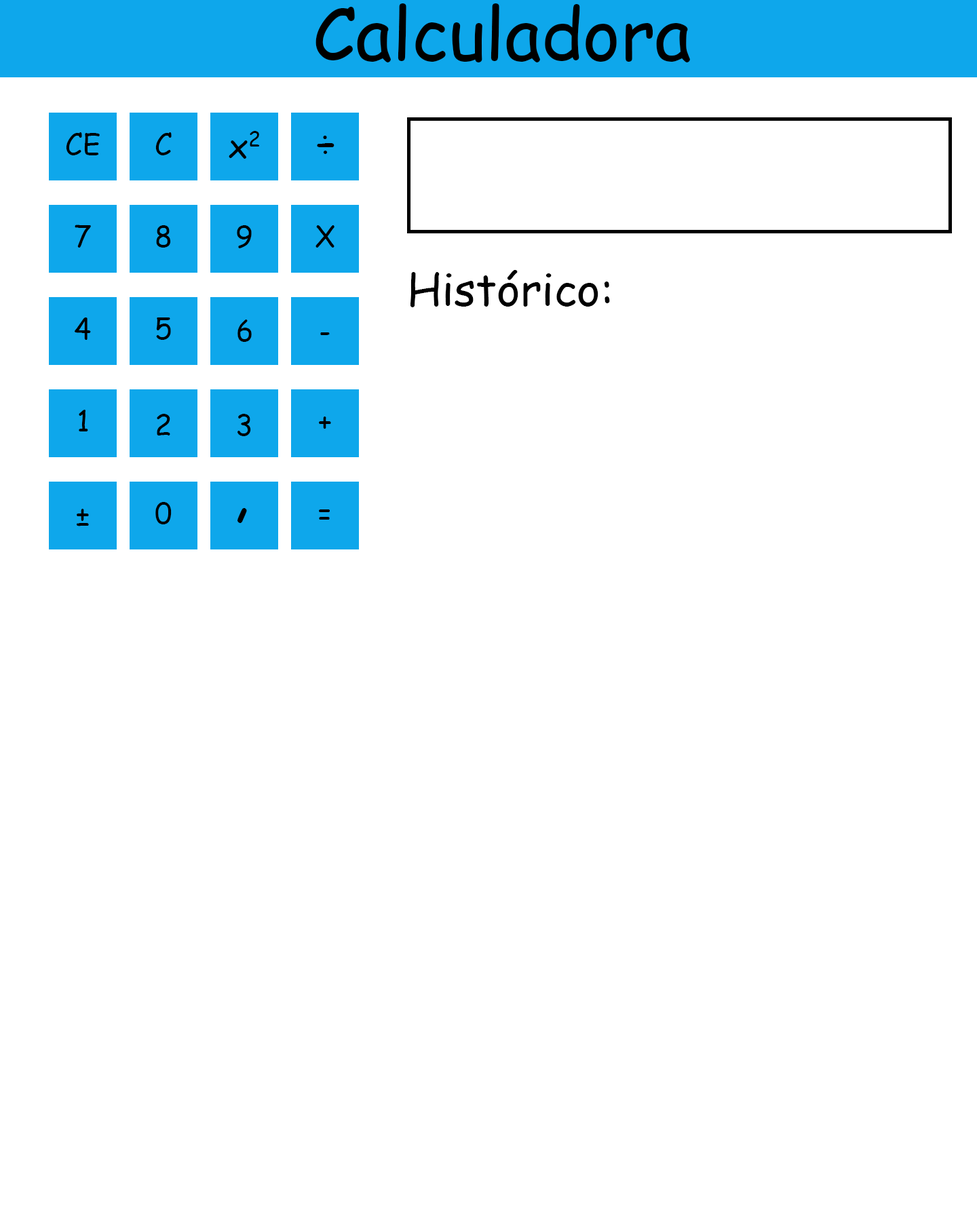
<style>
.page{position:relative;width:977px;height:1221px;background:#ffffff}
.page>*{position:absolute;margin:0}
.t1{font:71.2px "ComicSansMS";color:#000000}
.t2{font:48.8px "ComicSansMS";color:#000000}
.t3{font:34.6px "ComicSansMS";color:#000000}
.t4{font:68.5px "ComicSansMS";color:#000000}
.t5{font:76.5px "ComicSansMS";color:#000000}
.t6{font:107.8px "ComicSansMS";color:#000000}
</style>
<div class="page">
<p class="t1" style="left:315px;top:3px;width:375px;height:59px">Calculadora</p>
<p class="t2" style="left:66px;top:132px;width:34px;height:23px">CE</p>
<p class="t2" style="left:155px;top:132px;width:17px;height:23px">C</p>
<p class="t3" style="left:229px;top:131px;width:31px;height:28px">x2</p>
<p class="t4" style="left:317px;top:136px;width:17px;height:18px">÷</p>
<p class="t2" style="left:75px;top:225px;width:16px;height:23px">7</p>
<p class="t2" style="left:156px;top:225px;width:15px;height:23px">8</p>
<p class="t2" style="left:237px;top:225px;width:15px;height:23px">9</p>
<p class="t2" style="left:315px;top:225px;width:19px;height:23px">X</p>
<p class="t5" style="left:410px;top:270px;width:200px;height:37px">Histórico:</p>
<p class="t2" style="left:75px;top:317px;width:16px;height:23px">4</p>
<p class="t2" style="left:156px;top:317px;width:15px;height:23px">5</p>
<p class="t2" style="left:237px;top:319px;width:15px;height:23px">6</p>
<p class="t2" style="left:320px;top:332px;width:10px;height:3px">-</p>
<p class="t2" style="left:79px;top:410px;width:9px;height:21px">1</p>
<p class="t2" style="left:157px;top:414px;width:13px;height:21px">2</p>
<p class="t2" style="left:237px;top:414px;width:14px;height:22px">3</p>
<p class="t2" style="left:319px;top:416px;width:12px;height:13px">+</p>
<p class="t2" style="left:77px;top:509px;width:12px;height:17px">±</p>
<p class="t2" style="left:155px;top:502px;width:17px;height:22px">0</p>
<p class="t6" style="left:237px;top:508px;width:10px;height:15px">,</p>
<p class="t2" style="left:319px;top:509px;width:11px;height:11px">=</p>
</div>
